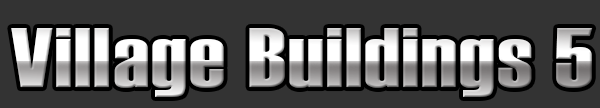
<style>
.page{position:relative;width:600px;height:108px;background:#333333}
.page>*{position:absolute;margin:0}
.t1{font:84.4px "Haettenschweiler";letter-spacing:0.02em;scale:1.2 1}
</style>
<div class="page">
<p class="t1" style="left:11px;top:28px;width:582px;height:69px">Village Buildings 5</p>
</div>
